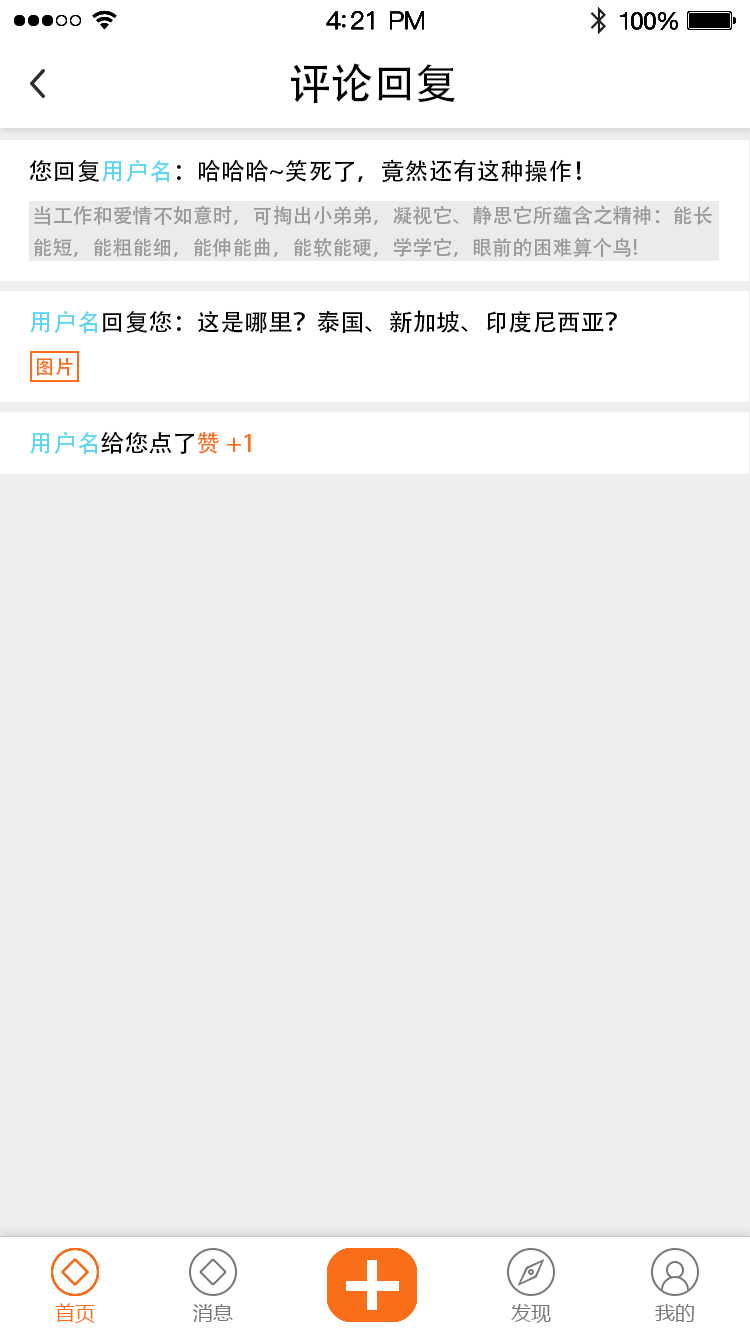
<style>
.page{position:relative;width:750px;height:1334px;background:#eeeeee}
.page>*{position:absolute;margin:0}
.t1{font:42px "AdobeHeitiStd-Regular";color:#000000}
.t2{font:24px "AdobeHeitiStd-Regular";color:#000000}
.t3{font:24px "AdobeHeitiStd-Regular";color:#5dd6f4}
.t4{font:20px/32px "AdobeHeitiStd-Regular";color:#999999}
.t5{font:20px "AdobeHeitiStd-Regular";color:#fb6e19}
.t6{font:24px "AdobeHeitiStd-Regular";color:#fb6f1a}
.t7{font:20px "MicrosoftYaHei";color:#fb6e19}
.t8{font:20px "MicrosoftYaHei";color:#777777}
</style>
<div class="page">
<p class="t1" style="left:291px;top:63px;width:164px;height:40px">评论回复</p>
<p class="t2" style="left:29px;top:159px;width:552px;height:24px">您回复<span class="t3">用户名</span>：哈哈哈~笑死了，竟然还有这种操作！</p>
<p class="t4" style="left:34px;top:205px;width:678px;height:52px">当工作和爱情不如意时，可掏出小弟弟，凝视它、静思它所蕴含之精神：能长<br>能短，能粗能细，能伸能曲，能软能硬，学学它，眼前的困难算个鸟!</p>
<p class="t2" style="left:30px;top:310px;width:587px;height:23px"><span class="t3">用户名</span>回复您：这是哪里？泰国、新加坡、印度尼西亚？</p>
<p class="t5" style="left:36px;top:357px;width:37px;height:19px">图片</p>
<p class="t2" style="left:30px;top:431px;width:221px;height:23px"><span class="t3">用户名</span>给您点了<span class="t6">赞 +1</span></p>
<p class="t7" style="left:55px;top:1303px;width:40px;height:20px">首页</p>
<p class="t8" style="left:193px;top:1304px;width:40px;height:18px">消息</p>
<p class="t8" style="left:511px;top:1304px;width:40px;height:19px">发现</p>
<p class="t8" style="left:655px;top:1304px;width:39px;height:18px">我的</p>
</div>
